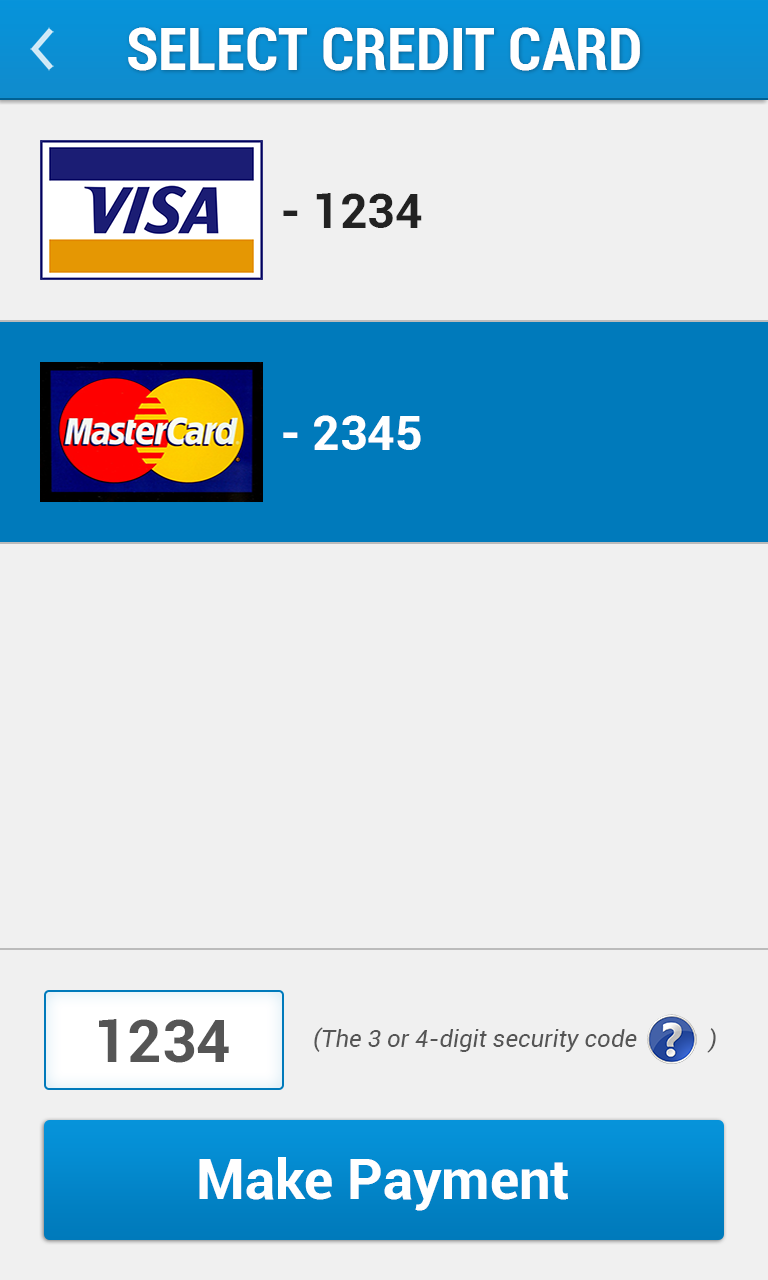
<style>
.page{position:relative;width:768px;height:1280px;background:#f0f0f0}
.page>*{position:absolute;margin:0}
.t1{font:60px "Roboto-BoldCondensed";color:#ffffff}
.t2{font:48px "Roboto-Bold";color:#222222}
.t3{font:48px "Roboto-Bold";color:#fefefe}
.t4{font:60px "Roboto-Bold";color:#555555}
.t5{font:24px "Roboto-Italic";color:#555555}
.t6{font:56px "Roboto-Bold";color:#ffffff}
</style>
<div class="page">
<p class="t1" style="left:128px;top:27px;width:512px;height:44px">SELECT CREDIT CARD</p>
<p class="t2" style="left:283px;top:193px;width:139px;height:35px">- 1234</p>
<p class="t3" style="left:283px;top:415px;width:138px;height:35px">- 2345</p>
<p class="t4" style="left:99px;top:1019px;width:130px;height:44px">1234</p>
<p class="t5" style="left:314px;top:1027px;width:402px;height:26px">(The 3 or 4-digit security code  )</p>
<p class="t6" style="left:199px;top:1157px;width:369px;height:54px">Make Payment</p>
</div>
